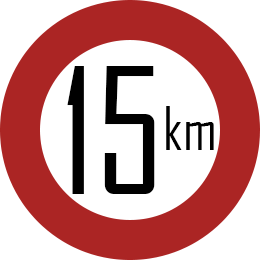
<style>
.page{position:relative;width:260px;height:260px;background:#ffffff}
.page>*{position:absolute;margin:0}
.t1{font:166.7px "AgencyFB-Reg";color:#000000}
.t2{font:58.3px "AgencyFB-Reg";color:#000000}
</style>
<div class="page">
<p class="t1" style="left:67px;top:66px;width:88px;height:128px">15</p>
<p class="t2" style="left:166px;top:106px;width:48px;height:44px">km</p>
</div>
